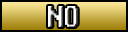
<style>
.page{position:relative;width:128px;height:32px;background:#000000}
.page>*{position:absolute;margin:0}
.t1{font:30px "Fixedsys";scale:0.9 1}
</style>
<div class="page">
<p class="t1" style="left:48px;top:6px;width:30px;height:21px">NO</p>
</div>
